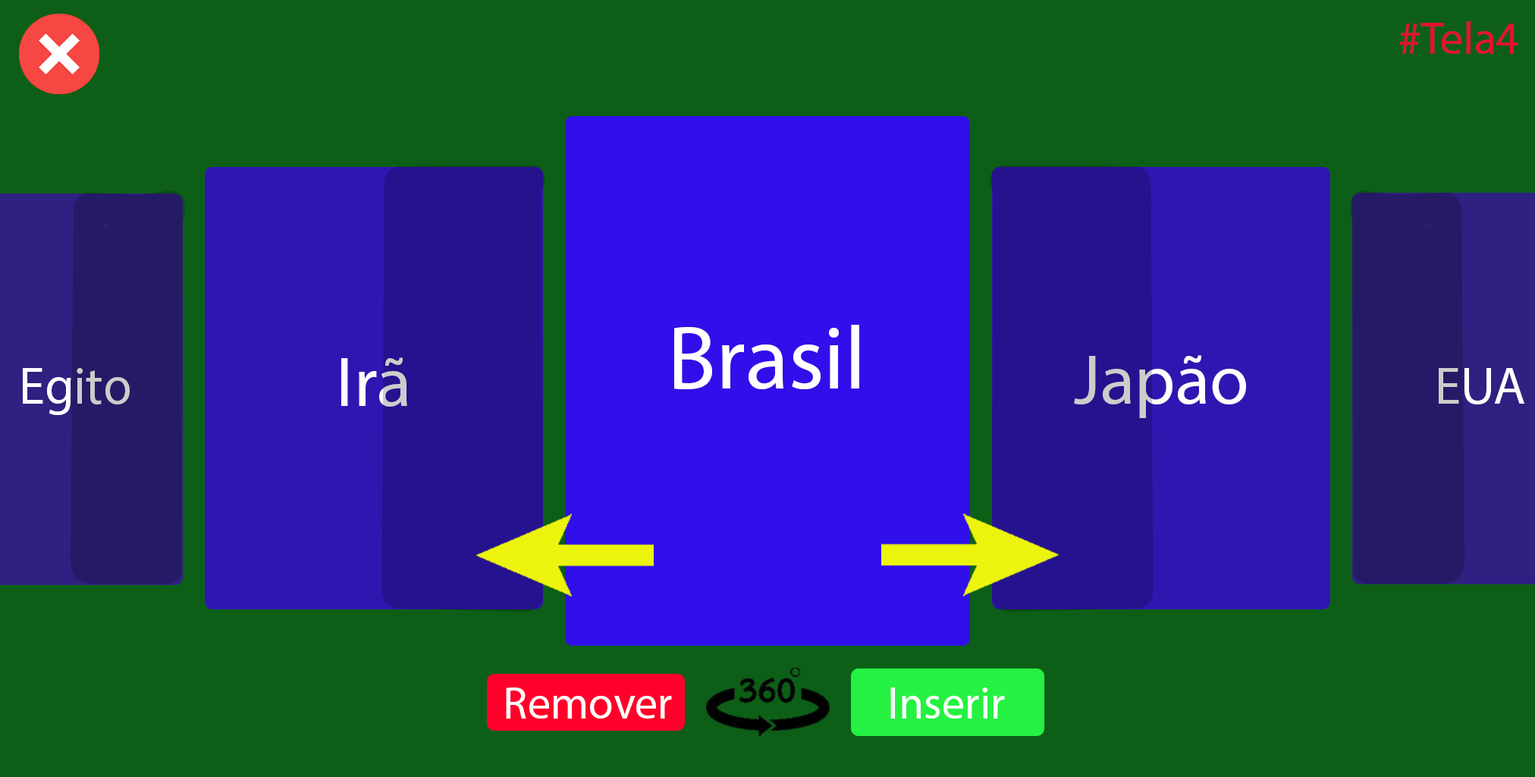
<style>
.page{position:relative;width:1535px;height:777px;background:#0d5f17}
.page>*{position:absolute;margin:0}
.t1{font:45.5px "MyriadPro-Regular";color:#ea0f33}
.t2{font:89.7px "MyriadPro-Regular";color:#ffffff}
.t3{font:71.2px "MyriadPro-Regular"}
.t4{font:52.7px "MyriadPro-Regular"}
.t5{font:52.7px "MyriadPro-Regular";color:#ffffff}
</style>
<div class="page">
<p class="t1" style="left:1400px;top:21px;width:119px;height:33px">#Tela4</p>
<p class="t2" style="left:674px;top:325px;width:185px;height:64px">Brasil</p>
<p class="t3" style="left:341px;top:357px;width:66px;height:50px">Irã</p>
<p class="t3" style="left:1074px;top:355px;width:172px;height:63px">Japão</p>
<p class="t4" style="left:23px;top:368px;width:107px;height:47px">Egito</p>
<p class="t5" style="left:1439px;top:368px;width:86px;height:36px">EUA</p>
</div>
